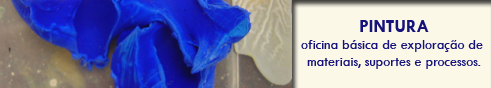
<style>
.page{position:relative;width:491px;height:88px;background:#fcf8e8}
.page>*{position:absolute;margin:0}
.t1{font:14px "TwCenMT-Regular";color:#15137b}
.t2{font:18px "TwCenMT-Bold";color:#15137b}
</style>
<div class="page">
<p class="t1" style="left:301px;top:20px;width:182px;height:49px;text-align:center"><span class="t2">PINTURA<br></span>oficina básica de exploração de <br>materiais, suportes e processos.</p>
</div>
